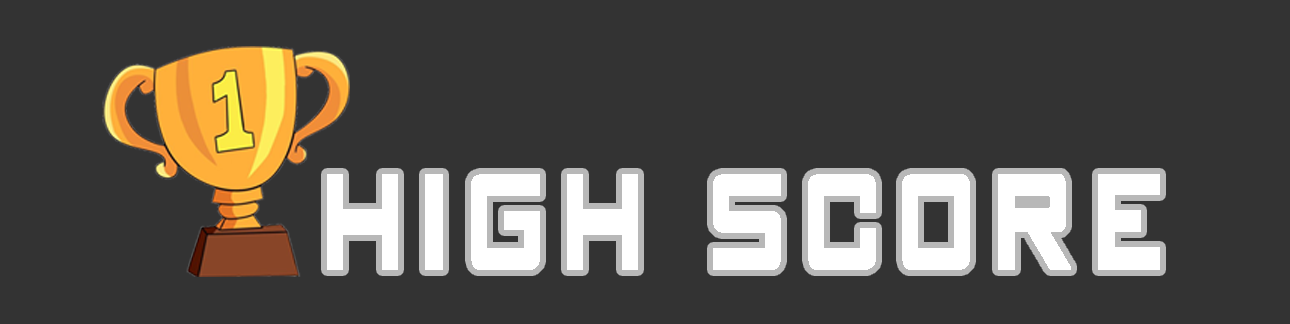
<style>
.page{position:relative;width:1290px;height:324px;background:#333333}
.page>*{position:absolute;margin:0}
.t1{font:117.7px "GAMECUBENDualSet";letter-spacing:0.2em;color:#ffffff;font-weight:bold;scale:0.6 1}
</style>
<div class="page">
<p class="t1" style="left:327px;top:174px;width:833px;height:96px">HIGH SCORE</p>
</div>
